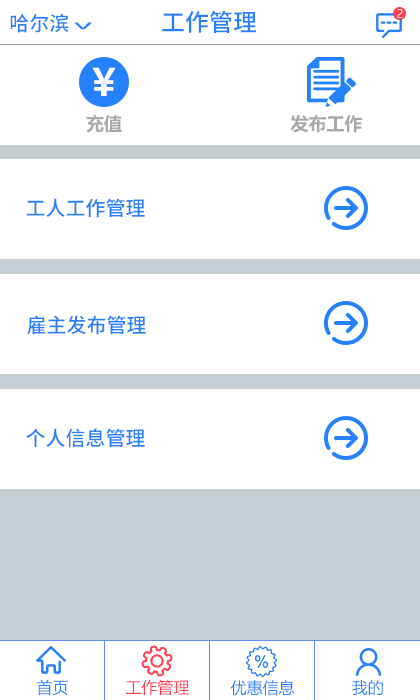
<style>
.page{position:relative;width:420px;height:700px;background:#ffffff}
.page>*{position:absolute;margin:0}
.t1{font:20px "NotoSansHans-Medium";color:#2681fc}
.t2{font:24px "NotoSansHans-Medium";color:#2681fc}
.t3{font:11px "MicrosoftYaHeiLight";color:#fcf9fa}
.t4{font:38.7px "NotoSansHans-Medium";color:#2681fc;scale:0.36 1}
.t5{font:37.4px "MicrosoftYaHei-Bold";color:#ffffff}
.t6{font:18px "MicrosoftYaHei-Bold";color:#aaaaaa}
.t7{font:16px "MicrosoftYaHeiLight";color:#2681fc}
.t8{font:16px "MicrosoftYaHeiLight";color:#ff3e50}
</style>
<div class="page">
<p class="t1" style="left:10px;top:13px;width:59px;height:20px">哈尔滨</p>
<p class="t2" style="left:162px;top:10px;width:94px;height:23px">工作管理</p>
<p class="t3" style="left:397px;top:9px;width:6px;height:9px">2</p>
<p class="t4" style="left:74px;top:22px;width:19px;height:8px;rotate:90deg">&gt;</p>
<p class="t5" style="left:92px;top:67px;width:24px;height:29px">￥</p>
<p class="t6" style="left:86px;top:115px;width:36px;height:18px">充值</p>
<p class="t6" style="left:290px;top:115px;width:73px;height:18px">发布工作</p>
<p class="t1" style="left:26px;top:198px;width:119px;height:20px">工人工作管理</p>
<p class="t1" style="left:27px;top:315px;width:119px;height:20px">雇主发布管理</p>
<p class="t1" style="left:26px;top:428px;width:119px;height:20px">个人信息管理</p>
<p class="t7" style="left:37px;top:679px;width:31px;height:17px">首页</p>
<p class="t8" style="left:126px;top:679px;width:63px;height:16px">工作管理</p>
<p class="t7" style="left:231px;top:680px;width:64px;height:16px">优惠信息</p>
<p class="t7" style="left:352px;top:680px;width:31px;height:16px">我的</p>
</div>
